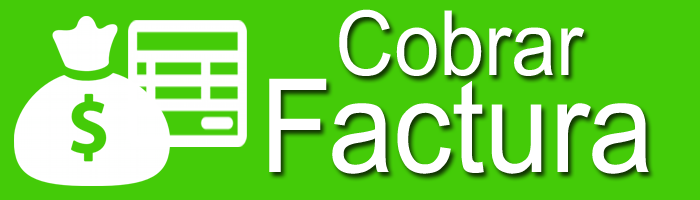
<style>
.page{position:relative;width:700px;height:200px;background:#44cb08}
.page>*{position:absolute;margin:0}
.t1{font:90px "ArialMT";color:#ffffff;scale:0.9 1}
.t2{font:130px "ArialMT";color:#ffffff;scale:0.9 1}
</style>
<div class="page">
<p class="t1" style="left:339px;top:9px;width:246px;height:67px">Cobrar</p>
<p class="t2" style="left:269px;top:78px;width:380px;height:96px">Factura</p>
</div>
